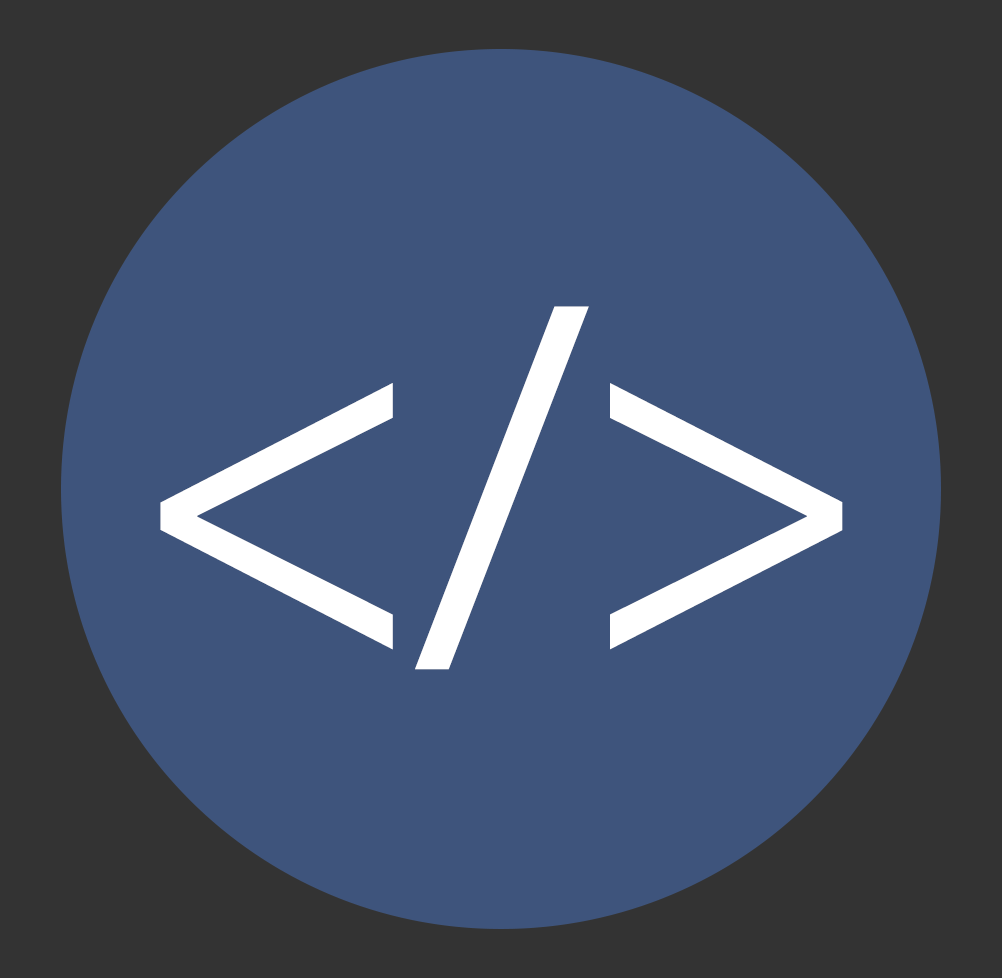
<style>
.page{position:relative;width:1002px;height:978px;background:#3e547c}
.page>*{position:absolute;margin:0}
.t1{font:500px "MyriadPro-Regular";letter-spacing:-0.02em;color:#ffffff}
</style>
<div class="page">
<p class="t1" style="left:160px;top:306px;width:683px;height:364px">&lt;/&gt;</p>
</div>
